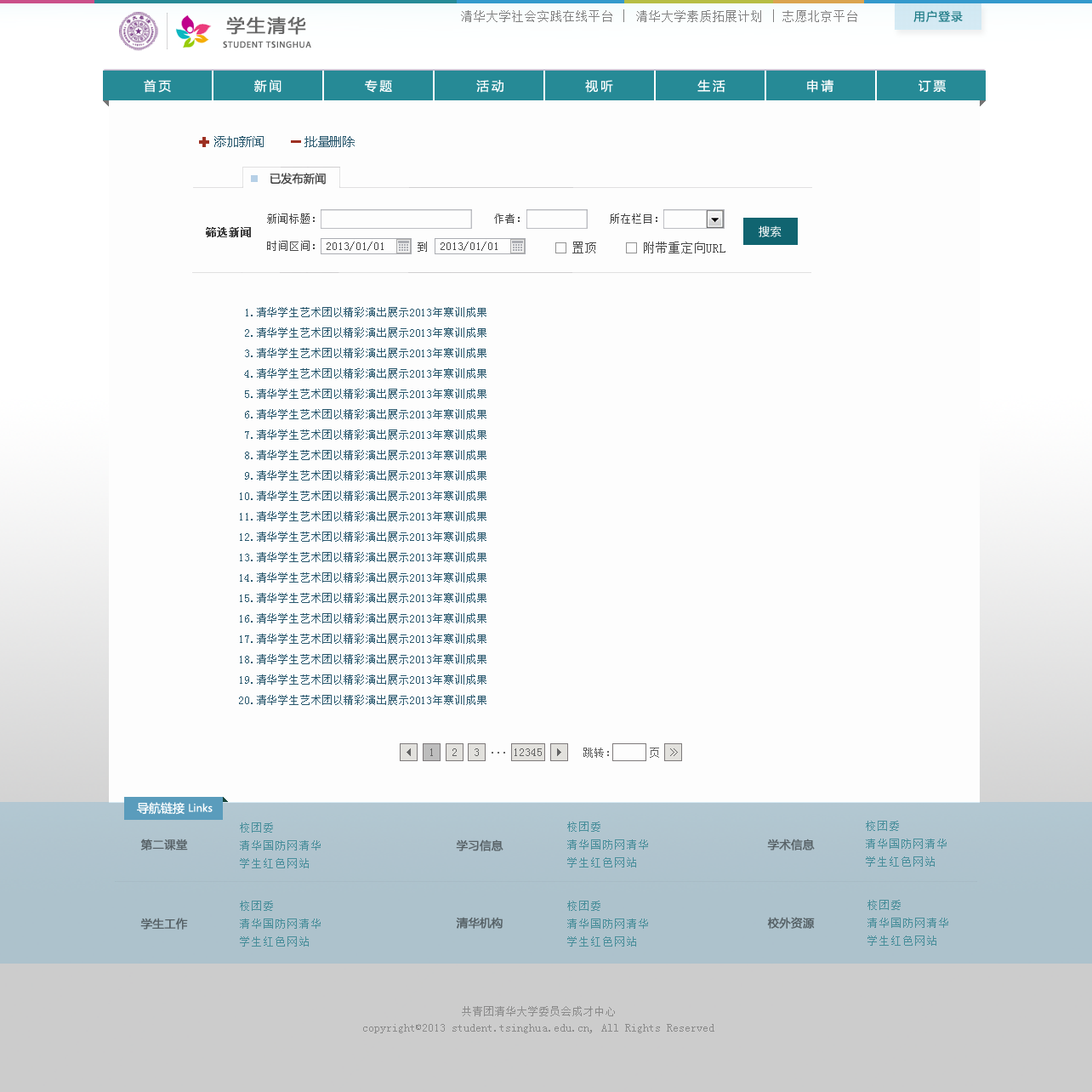
<style>
.page{position:relative;width:1092px;height:1092px;background:#fdfdfd}
.page>*{position:absolute;margin:0}
.t1{font:18.1px "MicrosoftYaHei";letter-spacing:0.1em;color:#666666;font-weight:bold}
.t2{font:11.9px "SimSun";letter-spacing:0.075em;color:#808080}
.t3{font:12.5px "SimSun";letter-spacing:0.075em;color:#808080}
.t4{font:11.3px "MicrosoftYaHei";letter-spacing:0.1em;color:#237e89}
.t5{font:9.1px "MyriadPro-Regular";letter-spacing:0.075em;color:#666666}
.t6{font:12.5px "MicrosoftYaHei";letter-spacing:0.2em;color:#ffffff}
.t7{font:12.5px "MicrosoftYaHei";letter-spacing:-0.01em;color:#29586e}
.t8{font:11.3px "MicrosoftYaHei";color:#404040}
.t9{font:11.3px "SimSun";color:#484848}
.t10{font:11.3px "SimSun";letter-spacing:-0.01em;color:#404040;font-weight:bold}
.t11{font:11.3px "MicrosoftYaHei";color:#ffffff}
.t12{font:12.5px "SimSun";color:#484848}
.t13{font:11.3px/20.4px "SimSun";letter-spacing:-0.01em;color:#29586e}
.t14{font:11.3px "SimSun";color:#636363}
.t15{font:10.2px "MicrosoftYaHei";color:#ffffff}
.t16{font:11.9px "MicrosoftYaHei";color:#ffffff}
.t17{font:11.3px/18.1px "SimSun";letter-spacing:0.075em;color:#478d9a}
.t18{font:11.3px "MicrosoftYaHei";color:#586267;font-weight:bold}
.t19{font:11.3px/18.1px "SimSun";letter-spacing:0.075em;color:#478d99}
.t20{font:11.3px "MicrosoftYaHei";color:#566166;font-weight:bold}
.t21{font:11.3px/15.9px "SimSun";color:#8a8a8a}
</style>
<div class="page">
<p class="t1" style="left:226px;top:16px;width:80px;height:19px">学生清华</p>
<p class="t2" style="left:461px;top:9px;width:396px;height:13px">清华大学社会实践在线平台 <span class="t3">| </span>清华大学素质拓展计划 <span class="t3">| </span>志愿北京平台</p>
<p class="t4" style="left:913px;top:10px;width:50px;height:12px">用户登录</p>
<p class="t5" style="left:223px;top:41px;width:88px;height:7px">STUDENT TSINGHUA</p>
<p class="t6" style="left:144px;top:79px;width:27px;height:14px">首页</p>
<p class="t6" style="left:254px;top:79px;width:28px;height:14px">新闻</p>
<p class="t6" style="left:365px;top:80px;width:27px;height:13px">专题</p>
<p class="t6" style="left:476px;top:80px;width:27px;height:13px">活动</p>
<p class="t6" style="left:585px;top:80px;width:28px;height:13px">视听</p>
<p class="t6" style="left:697px;top:79px;width:28px;height:14px">生活</p>
<p class="t6" style="left:807px;top:79px;width:26px;height:14px">申请</p>
<p class="t6" style="left:918px;top:80px;width:28px;height:12px">订票</p>
<p class="t7" style="left:214px;top:136px;width:50px;height:11px">添加新闻</p>
<p class="t7" style="left:304px;top:136px;width:51px;height:11px">批量删除</p>
<p class="t8" style="left:270px;top:173px;width:56px;height:12px">已发布新闻</p>
<p class="t9" style="left:267px;top:213px;width:48px;height:11px">新闻标题：</p>
<p class="t9" style="left:494px;top:213px;width:26px;height:11px">作者：</p>
<p class="t9" style="left:610px;top:213px;width:47px;height:11px">所在栏目：</p>
<p class="t10" style="left:206px;top:227px;width:45px;height:10px">筛选新闻</p>
<p class="t11" style="left:759px;top:225px;width:23px;height:12px">搜索</p>
<p class="t9" style="left:267px;top:241px;width:48px;height:10px">时间区间：</p>
<p class="t9" style="left:327px;top:242px;width:57px;height:9px">2013/01/01</p>
<p class="t9" style="left:418px;top:242px;width:9px;height:10px">到</p>
<p class="t9" style="left:441px;top:242px;width:57px;height:9px">2013/01/01</p>
<p class="t12" style="left:572px;top:242px;width:24px;height:11px">置顶</p>
<p class="t12" style="left:644px;top:242px;width:81px;height:11px">附带重定向URL</p>
<p class="t13" style="left:239px;top:307px;width:247px;height:398px">1.清华学生艺术团以精彩演出展示2013年寒训成果<br> 2.清华学生艺术团以精彩演出展示2013年寒训成果<br> 3.清华学生艺术团以精彩演出展示2013年寒训成果<br> 4.清华学生艺术团以精彩演出展示2013年寒训成果<br> 5.清华学生艺术团以精彩演出展示2013年寒训成果<br> 6.清华学生艺术团以精彩演出展示2013年寒训成果<br> 7.清华学生艺术团以精彩演出展示2013年寒训成果<br> 8.清华学生艺术团以精彩演出展示2013年寒训成果<br> 9.清华学生艺术团以精彩演出展示2013年寒训成果<br>10.清华学生艺术团以精彩演出展示2013年寒训成果<br>11.清华学生艺术团以精彩演出展示2013年寒训成果<br>12.清华学生艺术团以精彩演出展示2013年寒训成果<br>13.清华学生艺术团以精彩演出展示2013年寒训成果<br>14.清华学生艺术团以精彩演出展示2013年寒训成果<br>15.清华学生艺术团以精彩演出展示2013年寒训成果<br>16.清华学生艺术团以精彩演出展示2013年寒训成果<br>17.清华学生艺术团以精彩演出展示2013年寒训成果<br>18.清华学生艺术团以精彩演出展示2013年寒训成果<br>19.清华学生艺术团以精彩演出展示2013年寒训成果<br>20.清华学生艺术团以精彩演出展示2013年寒训成果</p>
<p class="t14" style="left:430px;top:748px;width:3px;height:8px">1</p>
<p class="t14" style="left:452px;top:748px;width:5px;height:8px">2</p>
<p class="t14" style="left:475px;top:748px;width:4px;height:8px">3</p>
<p class="t14" style="left:515px;top:748px;width:27px;height:8px">12345</p>
<p class="t14" style="left:583px;top:748px;width:26px;height:10px">跳转：</p>
<p class="t14" style="left:650px;top:748px;width:9px;height:10px">页</p>
<p class="t14" style="left:492px;top:752px;width:13px;height:2px">...</p>
<p class="t15" style="left:137px;top:802px;width:76px;height:13px"><span class="t16">导航链接 </span>Links</p>
<p class="t17" style="left:567px;top:822px;width:81px;height:45px">校团委<br>清华国防网清华<br>学生红色网站</p>
<p class="t17" style="left:866px;top:821px;width:81px;height:46px">校团委<br>清华国防网清华<br>学生红色网站</p>
<p class="t17" style="left:240px;top:822px;width:81px;height:46px">校团委<br>清华国防网清华<br>学生红色网站</p>
<p class="t18" style="left:140px;top:839px;width:48px;height:11px">第二课堂</p>
<p class="t18" style="left:456px;top:839px;width:47px;height:12px">学习信息</p>
<p class="t18" style="left:767px;top:839px;width:48px;height:11px">学术信息</p>
<p class="t19" style="left:240px;top:901px;width:81px;height:46px">校团委<br>清华国防网清华<br>学生红色网站</p>
<p class="t19" style="left:567px;top:901px;width:81px;height:46px">校团委<br>清华国防网清华<br>学生红色网站</p>
<p class="t19" style="left:867px;top:900px;width:81px;height:46px">校团委<br>清华国防网清华<br>学生红色网站</p>
<p class="t20" style="left:140px;top:918px;width:48px;height:12px">学生工作</p>
<p class="t20" style="left:456px;top:917px;width:47px;height:12px">清华机构</p>
<p class="t20" style="left:767px;top:917px;width:48px;height:12px">校外资源</p>
<p class="t21" style="left:363px;top:1006px;width:351px;height:27px;text-align:center">共青团清华大学委员会成才中心<br>copyright©2013 student.tsinghua.edu.cn, All Rights Reserved</p>
</div>
